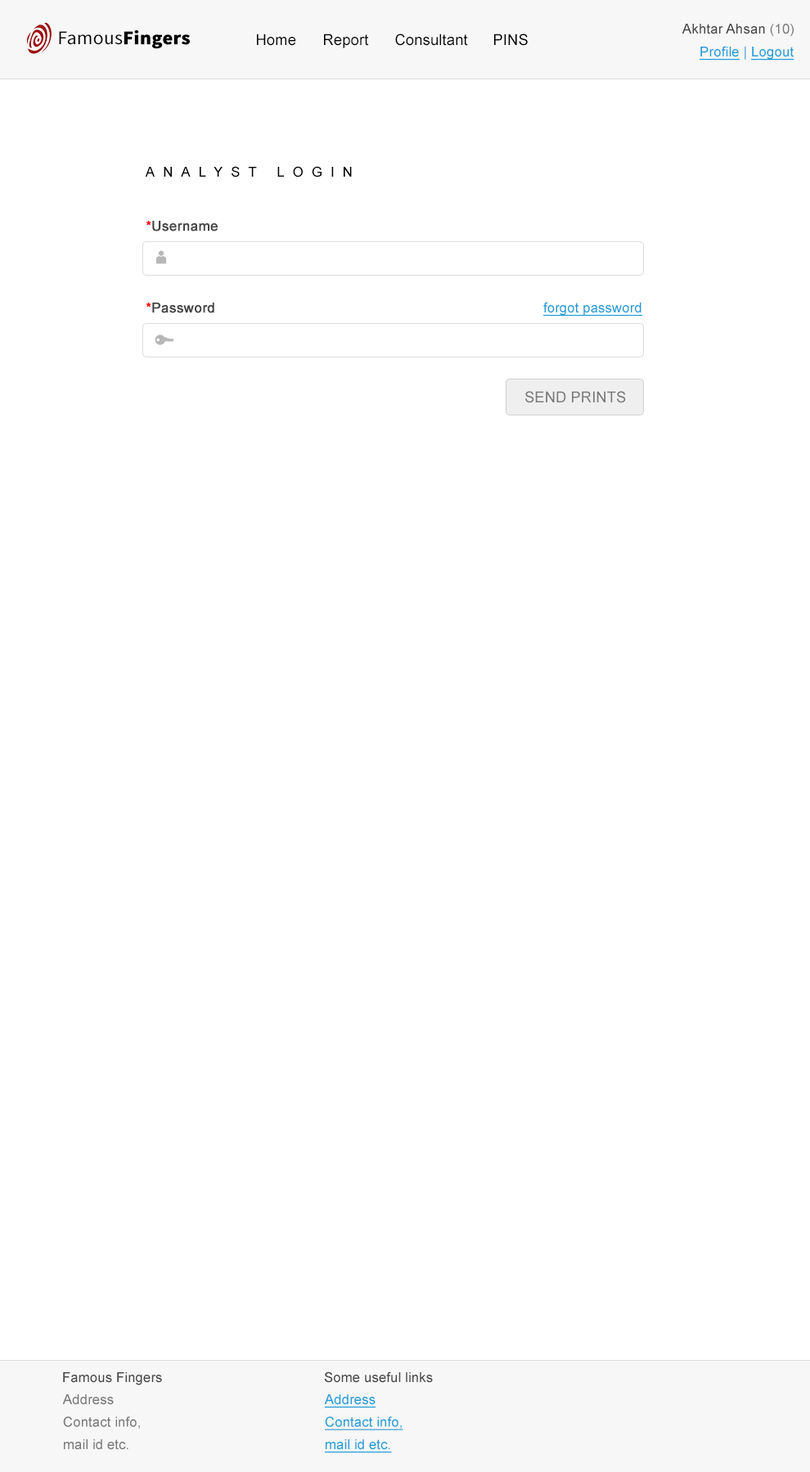
<style>
.page{position:relative;width:810px;height:1472px;background:#ffffff}
.page>*{position:absolute;margin:0}
.t1{font:13.7px "ArialMT";letter-spacing:0.01em;color:#444444}
.t2{font:13.7px "ArialMT";letter-spacing:0.01em;color:#777777}
.t3{font:19.2px "SourceSansPro-Bold";letter-spacing:0.01em;color:#000000;font-weight:bold}
.t4{font:19.2px "SourceSansPro-Regular";letter-spacing:0.01em;color:#000000}
.t5{font:9.8px "ArialMT";letter-spacing:0.01em;color:#000000}
.t6{font:9.8px "ArialMT";letter-spacing:0.01em;color:#000000;text-transform:uppercase}
.t7{font:13.7px "ArialMT";letter-spacing:0.01em;color:#1c9cd8;text-decoration:underline}
.t8{font:13.7px "ArialMT";letter-spacing:0.01em;color:#1c9cd8}
.t9{font:13.7px "ArialMT";letter-spacing:0.6em;color:#000000;text-transform:uppercase}
.t10{font:13.7px "ArialMT";letter-spacing:0.005em;color:#444444;font-weight:bold}
.t11{font:13.7px "ArialMT";letter-spacing:0.005em;color:#ff0000;font-weight:bold}
.t12{font:13.7px "ArialMT";letter-spacing:0.005em;color:#1c9cd8;text-decoration:underline}
.t13{font:15px "ArialMT";letter-spacing:0.005em;color:#787878;text-transform:uppercase}
.t14{font:13.7px "ArialMT";letter-spacing:0.005em;color:#444444}
.t15{font:13.7px/22.5px "ArialMT";letter-spacing:0.005em;color:#777777}
.t16{font:13.7px/22.5px "ArialMT";letter-spacing:0.005em;color:#1c9cd8;text-decoration:underline}
</style>
<div class="page">
<p class="t1" style="left:681px;top:24px;width:112px;height:13px">Akhtar Ahsan <span class="t2">(10)</span></p>
<p class="t3" style="left:59px;top:30px;width:131px;height:19px"><span class="t4">Famous</span>Fingers</p>
<p class="t5" style="left:257px;top:34px;width:39px;height:12px">Home</p>
<p class="t5" style="left:324px;top:34px;width:45px;height:14px">Report</p>
<p class="t5" style="left:395px;top:34px;width:73px;height:12px">Consultant</p>
<p class="t6" style="left:494px;top:34px;width:34px;height:12px">PINs</p>
<p class="t7" style="left:699px;top:46px;width:95px;height:15px">Profile<span class="t8"> | </span>Logout</p>
<p class="t9" style="left:145px;top:166px;width:207px;height:12px">Analyst Login</p>
<p class="t10" style="left:146px;top:221px;width:72px;height:10px"><span class="t11">*</span>Username</p>
<p class="t10" style="left:146px;top:303px;width:68px;height:10px"><span class="t11">*</span>Password</p>
<p class="t12" style="left:543px;top:302px;width:99px;height:15px">forgot password</p>
<p class="t13" style="left:525px;top:391px;width:101px;height:12px">Send Prints</p>
<p class="t14" style="left:63px;top:1373px;width:99px;height:13px">Famous Fingers</p>
<p class="t14" style="left:324px;top:1372px;width:109px;height:11px">Some useful links</p>
<p class="t15" style="left:62px;top:1395px;width:78px;height:55px">Address<br>Contact info,<br>mail id etc.</p>
<p class="t16" style="left:324px;top:1395px;width:79px;height:59px">Address<br>Contact info,<br>mail id etc.</p>
</div>
